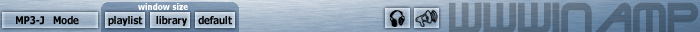
<style>
.page{position:relative;width:700px;height:32px}
.page>*{position:absolute;margin:0}
.t1{font:9px "Tahoma-Bold";color:#ffffff;scale:0.9 1}
.t2{font:48px "TerminatorTwo";color:#566a7e;scale:0.9 1}
.t3{font:10.5px "Tahoma-Bold";color:#000000;scale:0.9 1}
</style>
<div class="page">
<p class="t1" style="left:138px;top:3px;width:50px;height:7px">window size</p>
<p class="t2" style="left:449px;top:2px;width:249px;height:32px">WWWinamp</p>
<p class="t3" style="left:16px;top:16px;width:63px;height:9px">MP3-J   Mode</p>
<p class="t3" style="left:108px;top:16px;width:124px;height:10px">playlist     library    default</p>
</div>
